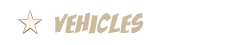
<style>
.page{position:relative;width:250px;height:45px;background:#ffffff}
.page>*{position:absolute;margin:0}
.t1{font:30px "HoustonComicsPersonalUse";color:#cdb99d}
</style>
<div class="page">
<p class="t1" style="left:55px;top:12px;width:89px;height:22px">VEHICLES</p>
</div>
